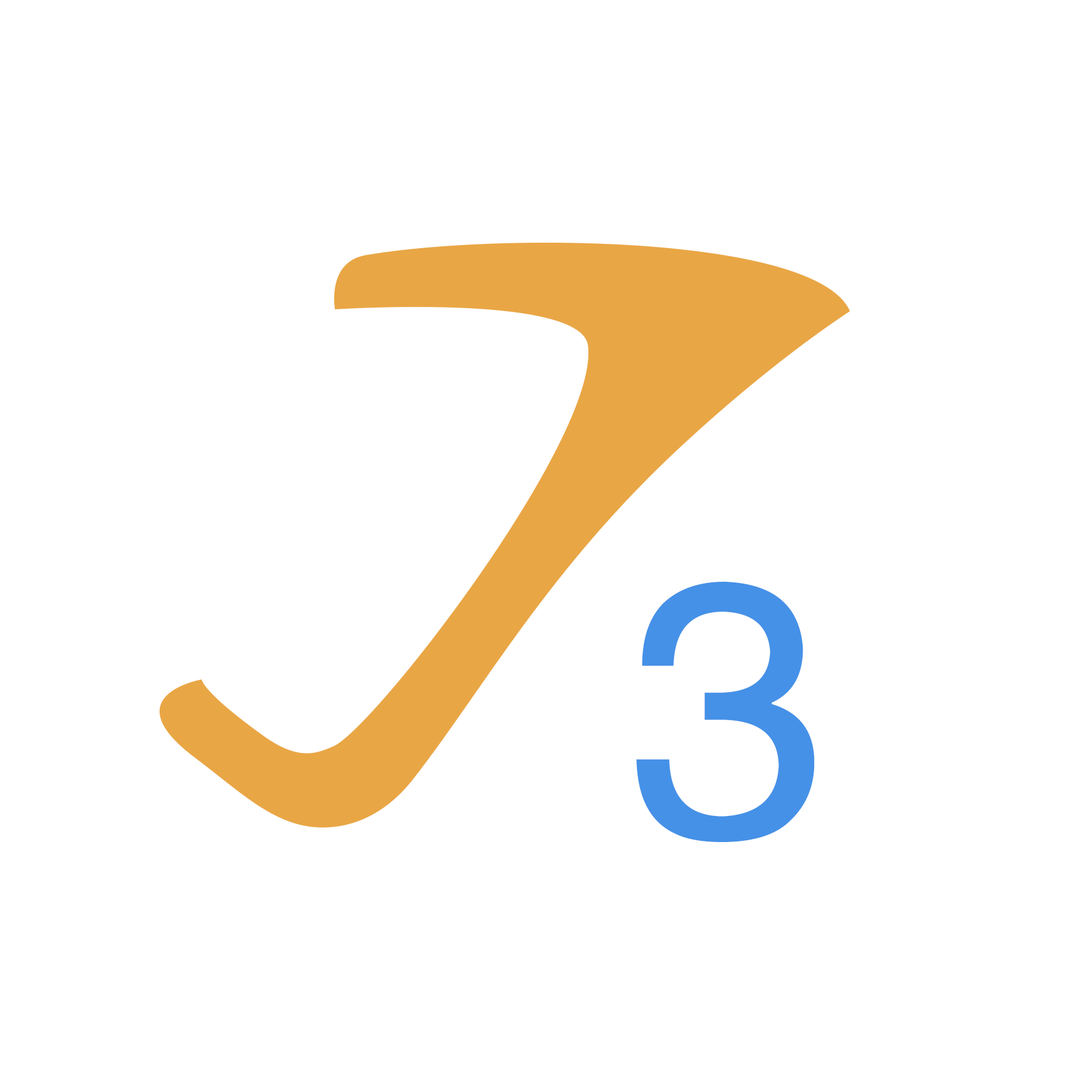
<style>
.page{position:relative;width:1092px;height:1092px;background:#ffffff}
.page>*{position:absolute;margin:0}
.t1{font:364px "GSZL--HSJHDT-0";color:#4591e7}
</style>
<div class="page">
<p class="t1" style="left:636px;top:581px;width:179px;height:261px">3</p>
</div>
